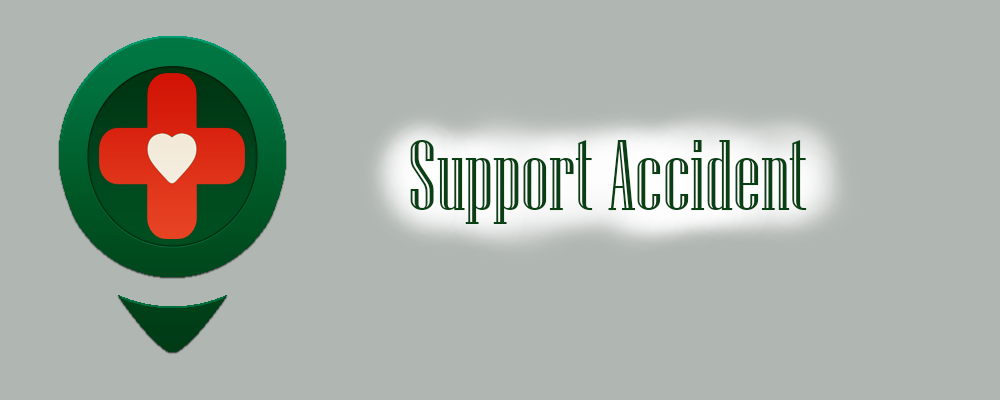
<style>
.page{position:relative;width:1000px;height:400px;background:#b0b6b2}
.page>*{position:absolute;margin:0}
.t1{font:100px "NiagaraEngraved-Reg";color:#084014}
</style>
<div class="page">
<p class="t1" style="left:410px;top:140px;width:397px;height:84px">Support Accident</p>
</div>
